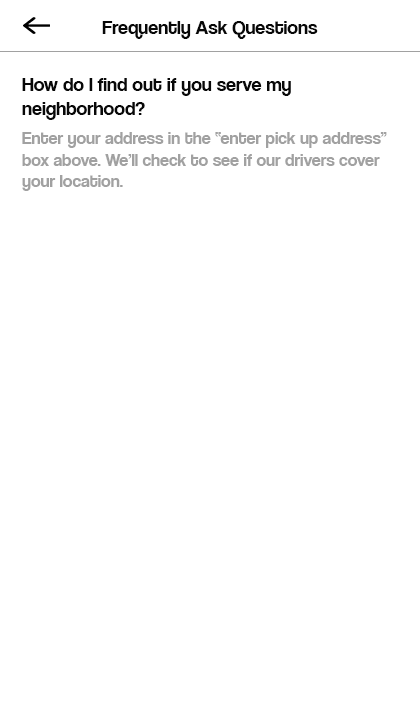
<style>
.page{position:relative;width:420px;height:720px;background:#ffffff}
.page>*{position:absolute;margin:0}
.t1{font:20px "CoolveticaRg-Regular";color:#080808}
.t2{font:18px "CoolveticaRg-Regular";color:#a1a1a1}
</style>
<div class="page">
<p class="t1" style="left:102px;top:21px;width:216px;height:18px">Frequently Ask Questions</p>
<p class="t1" style="left:22px;top:78px;width:269px;height:42px">How do I find out if you serve my<br>neighborhood?</p>
<p class="t2" style="left:22px;top:132px;width:365px;height:59px">Enter your address in the “enter pick up address” <br>box above. We’ll check to see if our drivers cover <br>your location.</p>
</div>
